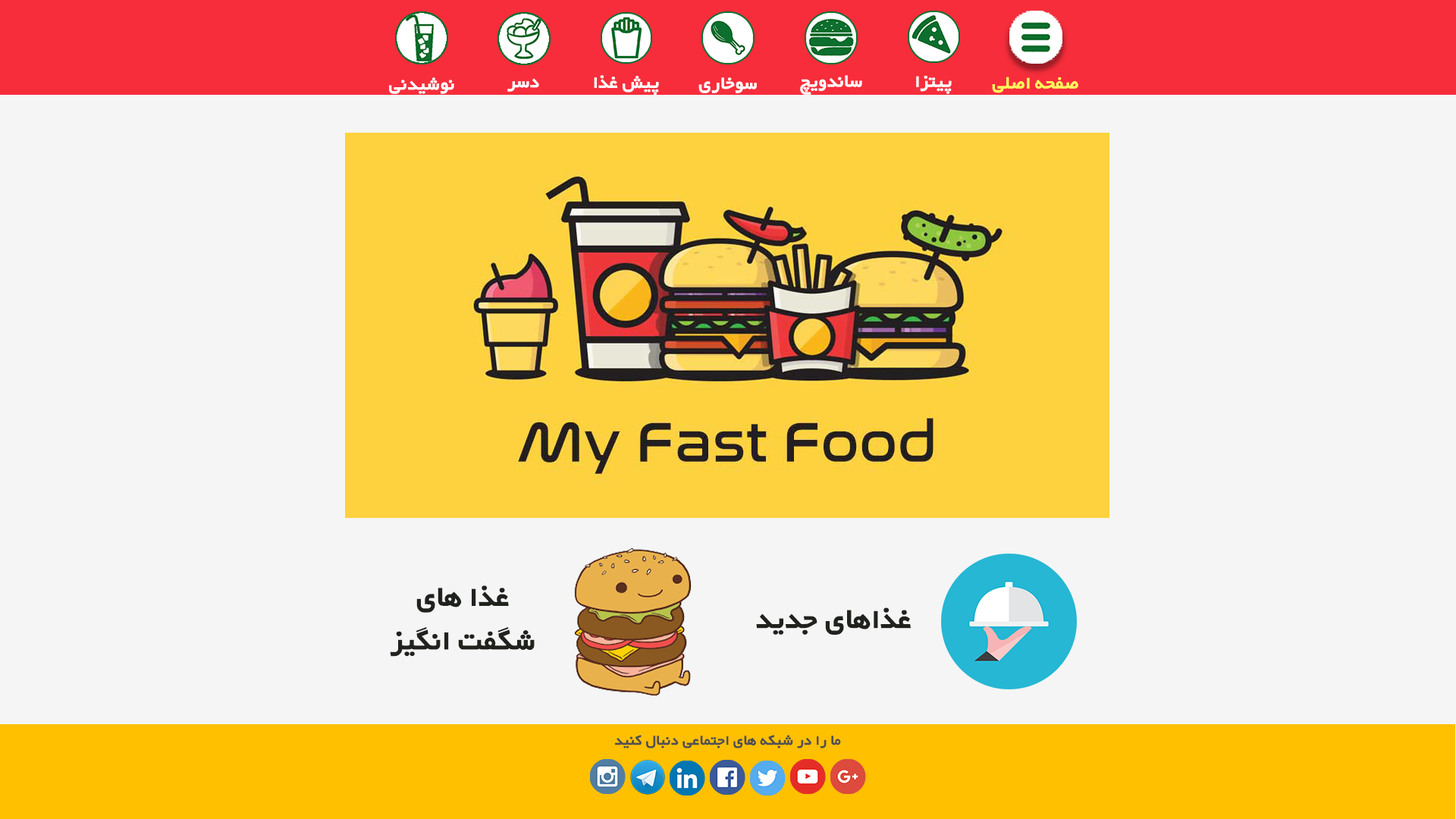
<style>
.page{position:relative;width:1456px;height:819px;background:#f5f5f5}
.page>*{position:absolute;margin:0}
.t1{font:22.7px "WyekanBold";color:#ffffff}
.t2{font:22.7px "WyekanBold";color:#fdff5d}
.t3{font:36.4px "WyekanBold";color:#20221e}
.t4{font:18.4px "WyekanBold";color:#505050}
</style>
<div class="page">
<p class="t1" style="left:389px;top:77px;width:65px;height:17px">نوشیدنی</p>
<p class="t1" style="left:594px;top:75px;width:65px;height:20px">پیش غذا</p>
<p class="t1" style="left:698px;top:77px;width:59px;height:16px">سوخاری</p>
<p class="t1" style="left:800px;top:75px;width:62px;height:20px">ساندویچ</p>
<p class="t1" style="left:916px;top:75px;width:36px;height:19px">پیتزا</p>
<p class="t2" style="left:992px;top:77px;width:86px;height:16px">صفحه اصلی</p>
<p class="t1" style="left:507px;top:78px;width:32px;height:14px">دسر</p>
<p class="t3" style="left:390px;top:585px;width:145px;height:72px;text-align:center">غذا های<br>شگفت انگیز</p>
<p class="t3" style="left:756px;top:607px;width:155px;height:28px">غذاهای جدید</p>
<p class="t4" style="left:614px;top:735px;width:227px;height:13px">ما را در شبکه های اجتماعی دنبال کنید</p>
</div>
